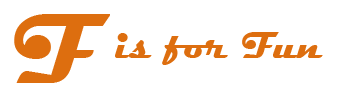
<style>
.page{position:relative;width:344px;height:96px;background:#ffffff}
.page>*{position:absolute;margin:0}
.t1{font:100px "Magneto-Bold";color:#dd6e0f}
.t2{font:37.5px "Magneto-Bold";color:#dd6e0f}
</style>
<div class="page">
<p class="t1" style="left:14px;top:14px;width:96px;height:69px">F</p>
<p class="t2" style="left:115px;top:32px;width:208px;height:33px">is for Fun</p>
</div>
